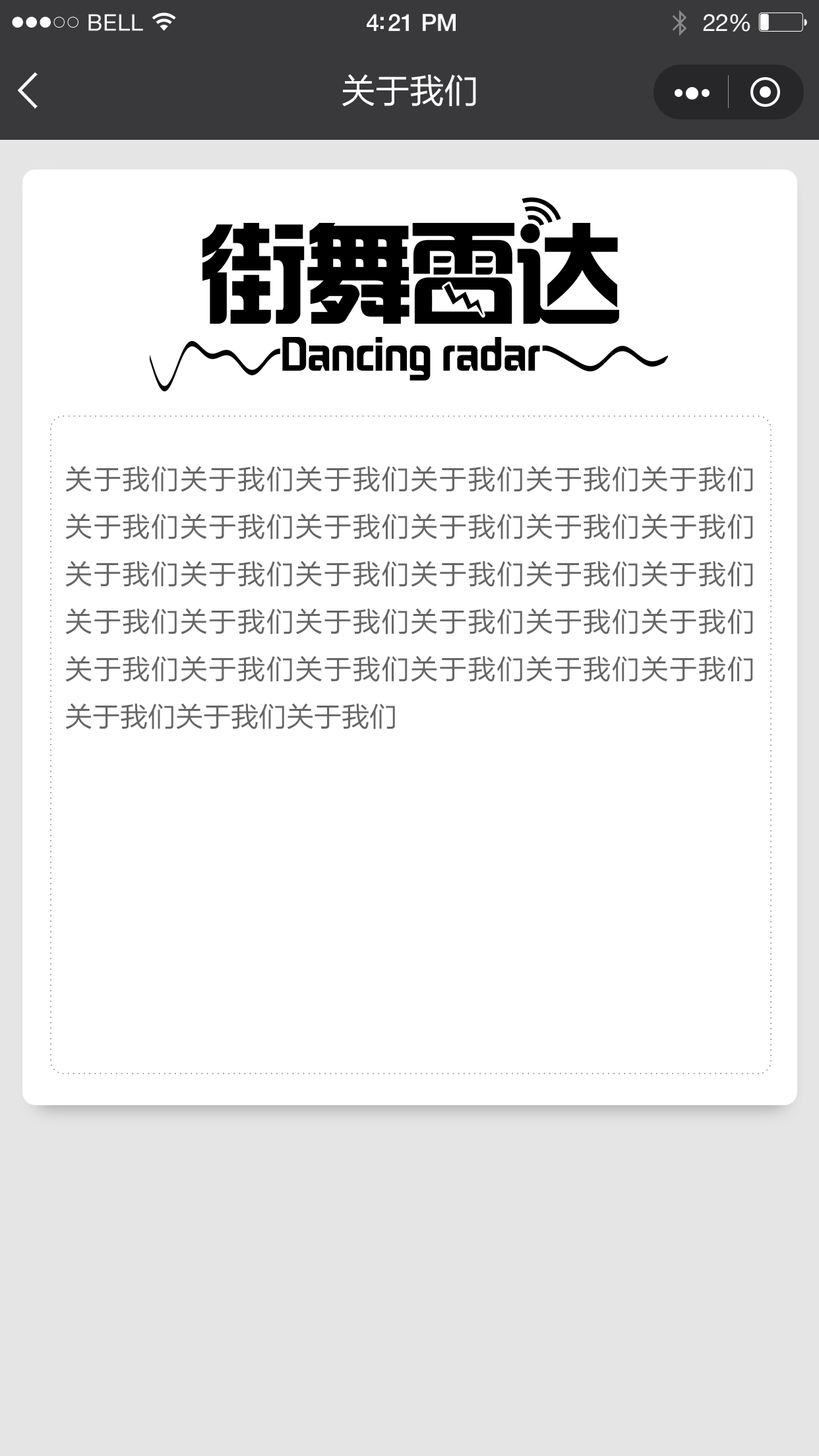
<style>
.page{position:relative;width:819px;height:1456px;background:#ffffff}
.page>*{position:absolute;margin:0}
.t1{font:34.3px "FZLTHJW--GB1-0";color:#ffffff}
.t2{font:41.8px "FZHZGBJW--GB1-0";letter-spacing:-0.025em;color:#000000}
.t3{font:27.7px/47.5px "FZLTHJW--GB1-0";color:#666666}
</style>
<div class="page">
<p class="t1" style="left:342px;top:74px;width:134px;height:32px">关于我们</p>
<p class="t2" style="left:282px;top:337px;width:258px;height:43px">Dancing radar</p>
<p class="t3" style="left:65px;top:466px;width:688px;height:263px;text-align:justify">关于我们关于我们关于我们关于我们关于我们关于我们关于我们关于我们关于我们关于我们关于我们关于我们关于我们关于我们关于我们关于我们关于我们关于我们关于我们关于我们关于我们关于我们关于我们关于我们关于我们关于我们关于我们关于我们关于我们关于我们关于我们关于我们关于我们</p>
</div>
